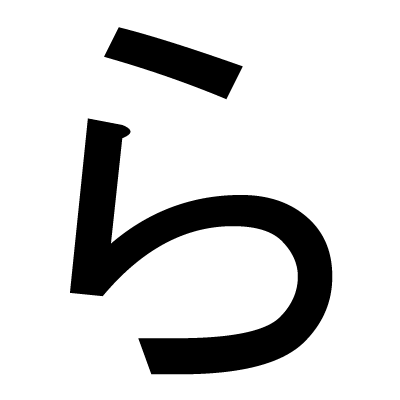
<style>
.page{position:relative;width:400px;height:400px;background:#ffffff}
.page>*{position:absolute;margin:0}
.t1{font:416.7px "MS-PGothic";color:#000000}
</style>
<div class="page">
<p class="t1" style="left:70px;top:27px;width:263px;height:348px">ら</p>
</div>
